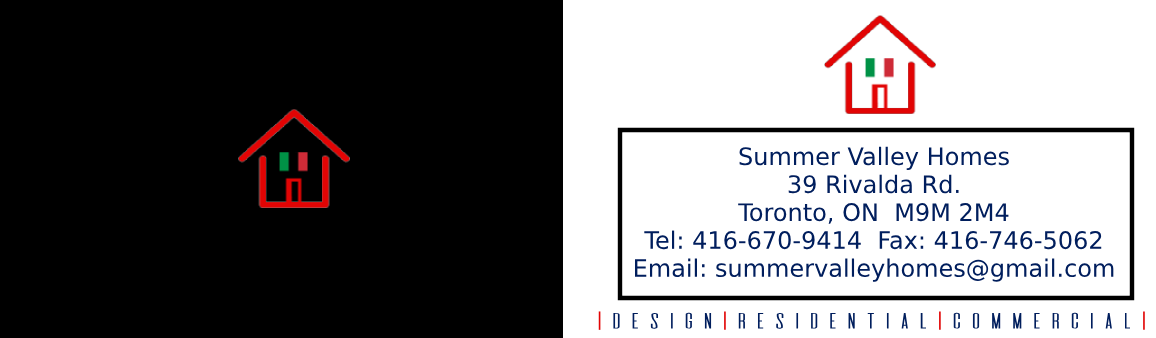
<style>
.page{position:relative;width:1156px;height:338px;background:#000000}
.page>*{position:absolute;margin:0}
.t1{font:24px "DejaVuSans";color:#001e5d}
.t2{font:19.4px "DeValencia-Regular";color:#001e5d;scale:1.69 1}
.t3{font:19.4px "DeValencia-Regular";color:#e20404;scale:1.69 1}
</style>
<div class="page">
<p class="t1" style="left:635px;top:146px;width:479px;height:136px;text-align:center">Summer Valley Homes<br>39 Rivalda Rd.<br>Toronto, ON  M9M 2M4<br>Tel: 416-670-9414  Fax: 416-746-5062<br>Email: summervalleyhomes@gmail.com</p>
<p class="t2" style="left:598px;top:311px;width:547px;height:19px"><span class="t3">|</span>Design<span class="t3">|</span>Residential<span class="t3">|</span>Commercial<span class="t3">|</span></p>
</div>
